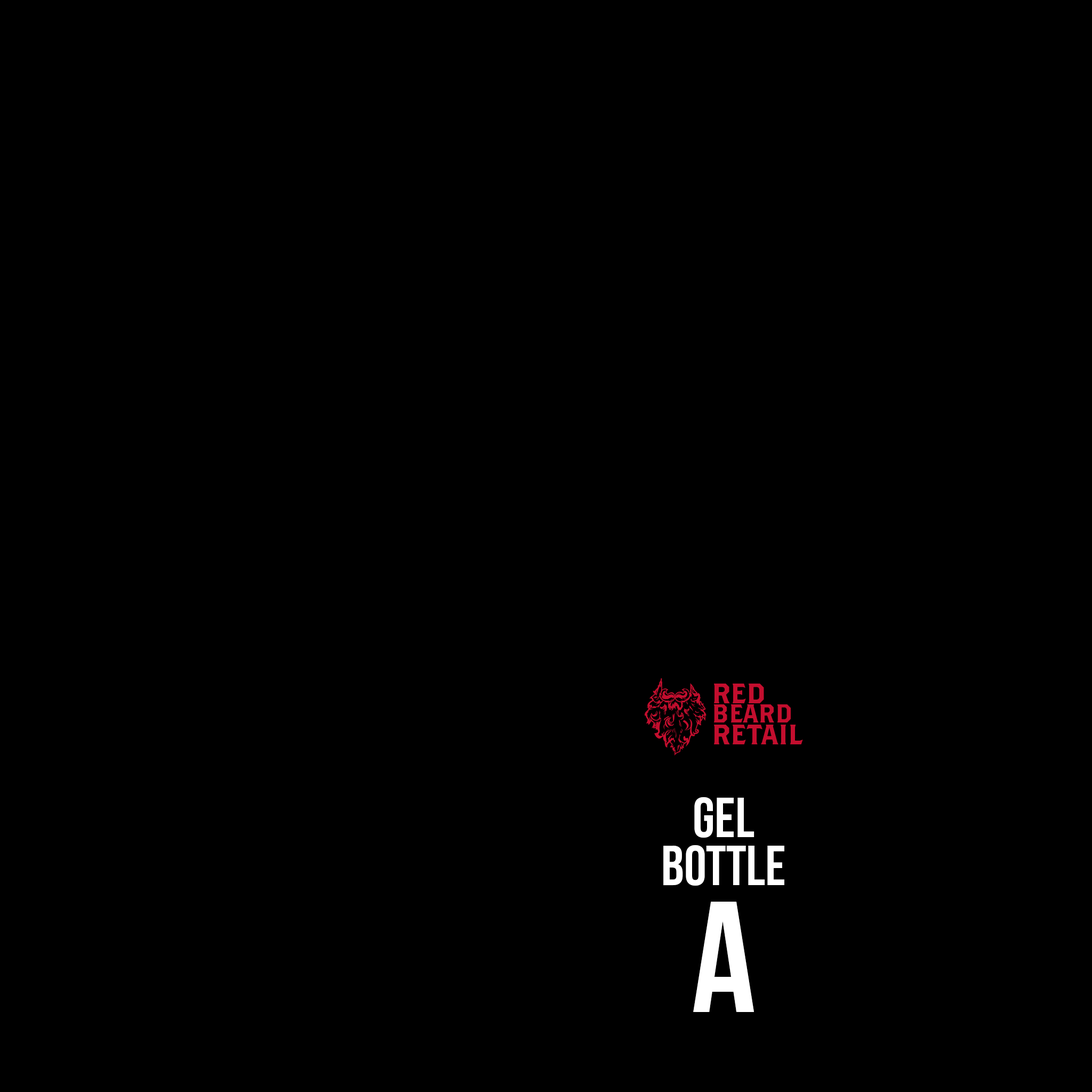
<style>
.page{position:relative;width:1092px;height:1092px;background:#000000}
.page>*{position:absolute;margin:0}
.t1{font:56.1px/47.6px "BebasNeueBold";color:#ffffff}
.t2{font:56.1px "BebasNeueBold";color:#ffffff}
.t3{font:157.5px/127.1px "BebasNeueBold";color:#ffffff}
</style>
<div class="page">
<p class="t1" style="left:663px;top:797px;width:121px;height:215px;text-align:center"><span class="t2">Gel<br></span>Bottle<br><span class="t3">A</span></p>
</div>
